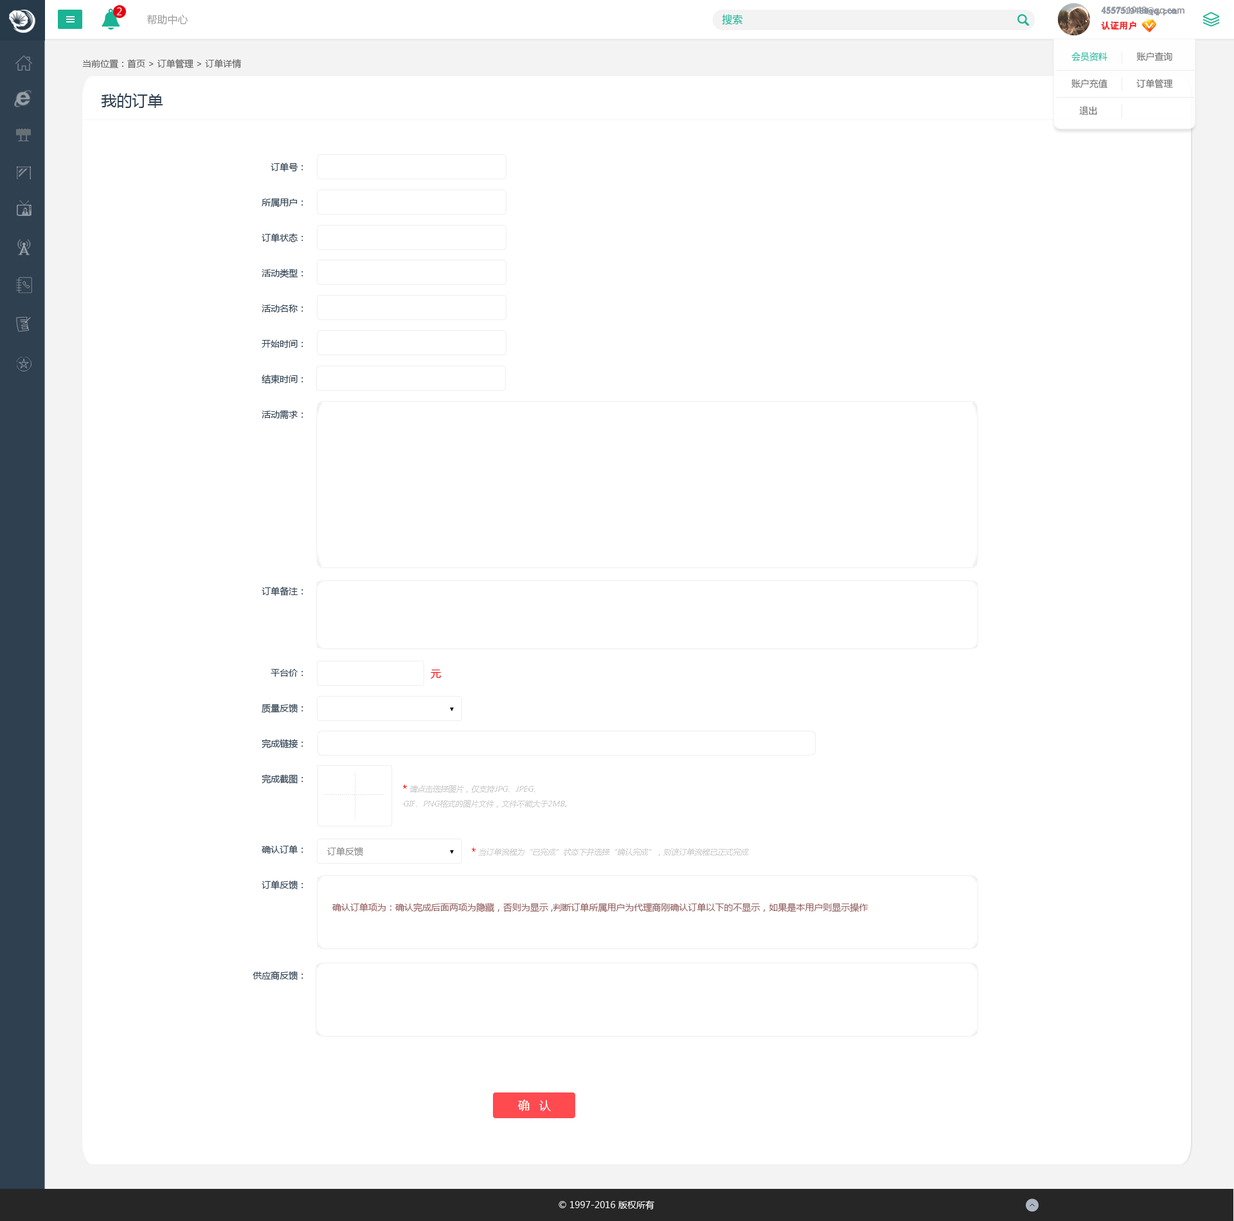
<style>
.page{position:relative;width:1234px;height:1221px;background:#ffffff}
.page>*{position:absolute;margin:0}
.t1{font:10.3px "MicrosoftYaHei";color:#ffffff}
.t2{font:10.3px "MicrosoftYaHei";color:#999999}
.t3{font:10.3px "MicrosoftYaHei";color:#1ab394}
.t4{font:9px/15.4px "AdobeHeitiStd-Regular";color:#999999}
.t5{font:9px/15.4px "AdobeHeitiStd-Regular";color:#f61e1e}
.t6{font:9px/15.4px "AdobeHeitiStd-Regular";color:#ffffff}
.t7{font:9px/15.4px "SimSun";color:#8894a4;font-weight:bold}
.t8{font:9px/15.4px "SimSun";color:#f61e1e}
.t9{font:9px/27px "MicrosoftYaHei";color:#666666}
.t10{font:9px/27px "MicrosoftYaHei";color:#1ab394}
.t11{font:9px "MicrosoftYaHei";color:#666666}
.t12{font:15.4px "MicrosoftYaHei";color:#2f4050}
.t13{font:9px/35.4px "MicrosoftYaHei";color:#2f4050}
.t14{font:10.3px "MicrosoftYaHei";color:#ff0107}
.t15{font:7.7px "MicrosoftYaHei";color:#cccccc;font-style:italic}
.t16{font:9px "MicrosoftYaHei";color:#ff0000}
.t17{font:9px "MicrosoftYaHei";color:#8b8b8b}
.t18{font:9px "MicrosoftYaHei";color:#956262}
.t19{font:9px "MicrosoftYaHei";color:#ffffff}
</style>
<div class="page">
<p class="t1" style="left:116px;top:7px;width:6px;height:8px">2</p>
<p class="t2" style="left:147px;top:14px;width:41px;height:11px">帮助中心</p>
<p class="t3" style="left:722px;top:14px;width:21px;height:11px">搜索</p>
<p class="t4" style="left:1101px;top:6px;width:84px;height:24px">455751948@qq.com<br><span class="t5">认证用户               </span><span class="t6">退出</span></p>
<p class="t7" style="left:1101px;top:7px;width:77px;height:23px">455751948@qq.com<br><span class="t8">认证用户</span></p>
<p class="t9" style="left:1072px;top:52px;width:101px;height:63px"><span class="t10">会员资料</span>           账户查询<br>账户充值           订单管理           <br>   退出</p>
<p class="t11" style="left:82px;top:59px;width:160px;height:10px">当前位置：首页 &gt; 订单管理 &gt; 订单详情</p>
<p class="t12" style="left:101px;top:93px;width:62px;height:15px">我的订单</p>
<p class="t13" style="left:253px;top:163px;width:50px;height:817px;text-align:right">订单号：<br>所属用户：<br>订单状态：<br>活动类型：<br>活动名称：<br>开始时间：<br>结束时间：<br>活动需求：<br><br><br><br><br>订单备注：<br><br><br>平台价：<br>质量反馈：<br>完成链接：<br>完成截图：<br><br>确认订单：<br>订单反馈：<br><br><br>供应商反馈：</p>
<p class="t14" style="left:431px;top:670px;width:10px;height:9px">元</p>
<p class="t15" style="left:403px;top:785px;width:164px;height:23px"><span class="t16">* </span>请点击选择图片，仅支持JPG、JPEG、<br>GIF、PNG格式的图片文件，文件不能大于2MB。</p>
<p class="t17" style="left:327px;top:847px;width:36px;height:9px">订单反馈</p>
<p class="t15" style="left:472px;top:848px;width:277px;height:8px"><span class="t16">* </span>当订单流程为“已完成”状态下并选择“确认完成”，则该订单流程已正式完成</p>
<p class="t18" style="left:332px;top:903px;width:537px;height:10px">确认订单项为：确认完成后面两项为隐藏，否则为显示 ,判断订单所属用户为代理商刚确认订单以下的不显示，如果是本用户则显示操作</p>
<p class="t19" style="left:559px;top:1201px;width:95px;height:9px">© 1997-2016 版权所有</p>
</div>
